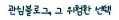
<style>
.page{position:relative;width:119px;height:20px;background:#ffffff}
.page>*{position:absolute;margin:0}
.t1{font:12px "CreChoM";letter-spacing:-0.075em;color:#0f0f35}
</style>
<div class="page">
<p class="t1" style="left:8px;top:4px;width:103px;height:13px">관심블로그, 그 위험한 선택</p>
</div>
